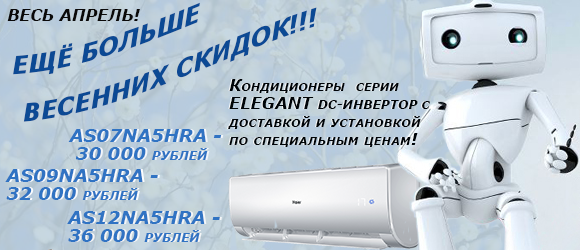
<style>
.page{position:relative;width:580px;height:250px}
.page>*{position:absolute;margin:0}
.t1{font:24px/48px "Verdana-BoldItalic";color:#0b4994;text-transform:uppercase}
.t2{font:16px "Verdana-BoldItalic";color:#0a0909;text-transform:uppercase}
.t3{font:16px/18px "Verdana-BoldItalic";font-variant:small-caps}
.t4{font:16px/18px "Verdana-BoldItalic";text-transform:uppercase}
.t5{font:12px/18px "Verdana-BoldItalic";text-transform:uppercase}
.t6{font:16px/18px "Verdana-BoldItalic";color:#000408;font-variant:small-caps}
.t7{font:16px/18px "Verdana-BoldItalic";color:#000408;text-transform:uppercase}
.t8{font:12px/18px "Verdana-BoldItalic";color:#000408;text-transform:uppercase}
.t9{font:18px/18px "Verdana-BoldItalic";color:#3073c3;text-transform:uppercase}
.t10{font:12px/18px "Verdana-BoldItalic";color:#3073c3;text-transform:uppercase}
</style>
<div class="page">
<p class="t1" style="left:13px;top:2px;width:304px;height:120px;rotate:-3deg">Ещё больше<br> весенних скидок!!!</p>
<p class="t2" style="left:7px;top:9px;width:133px;height:12px">Весь апрель!</p>
<p class="t3" style="left:227px;top:79px;width:202px;height:68px">Кондиционеры  серии<span class="t4"> <br>Elegant </span><span class="t5">DC-инвертор </span>с доставкой и установкой по специальным ценам!</p>
<p class="t6" style="left:228px;top:79px;width:202px;height:68px">Кондиционеры  серии<span class="t7"> <br>Elegant </span><span class="t8">DC-инвертор </span>с доставкой и установкой по специальным ценам!</p>
<p class="t9" style="left:68px;top:129px;width:154px;height:31px">AS07NA5HRA -<br> 30 000 <span class="t10">рублей</span></p>
<p class="t9" style="left:5px;top:169px;width:153px;height:31px">AS09NA5HRA - <br>32 000 <span class="t10">рублей</span></p>
<p class="t9" style="left:67px;top:211px;width:153px;height:31px">AS12NA5HRA - <br>36 000 <span class="t10">рублей</span></p>
</div>
